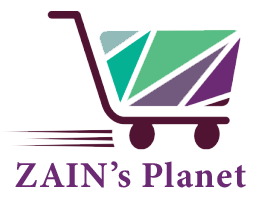
<style>
.page{position:relative;width:261px;height:209px;background:#ffffff}
.page>*{position:absolute;margin:0}
.t1{font:36.5px "MinionConceptRoman-Bold";letter-spacing:0.025em;color:#6c2a75}
</style>
<div class="page">
<p class="t1" style="left:15px;top:161px;width:231px;height:27px">ZAIN’s Planet</p>
</div>
